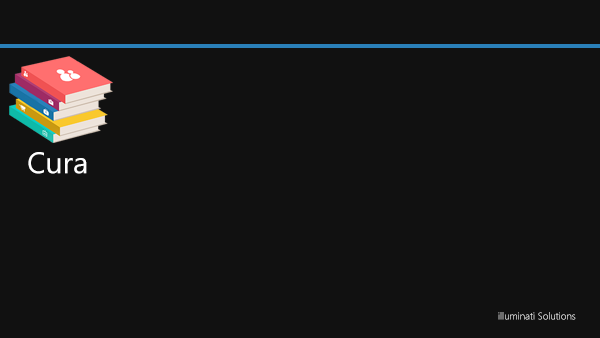
<style>
.page{position:relative;width:600px;height:338px;background:#111111}
.page>*{position:absolute;margin:0}
.t1{font:30px "SegoeUI";color:#ffffff}
.t2{font:10px "SegoeUI-Light"}
</style>
<div class="page">
<p class="t1" style="left:28px;top:152px;width:59px;height:22px">Cura</p>
<p class="t2" style="left:498px;top:312px;width:78px;height:8px">illuminati Solutions</p>
</div>
